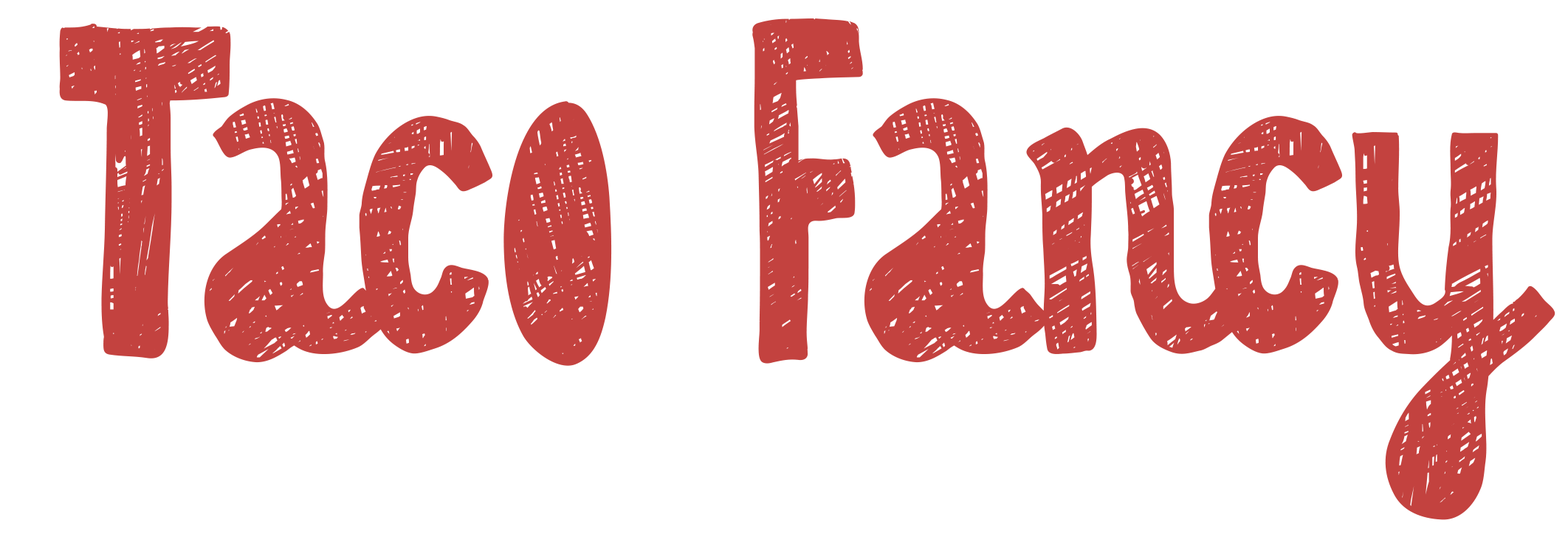
<style>
.page{position:relative;width:1568px;height:537px;background:#ffffff}
.page>*{position:absolute;margin:0}
.t1{font:479.8px "Chalkboard52-2-Regular";letter-spacing:-0.005em;color:#c3423f}
</style>
<div class="page">
<p class="t1" style="left:59px;top:18px;width:1496px;height:502px">Taco Fancy</p>
</div>
